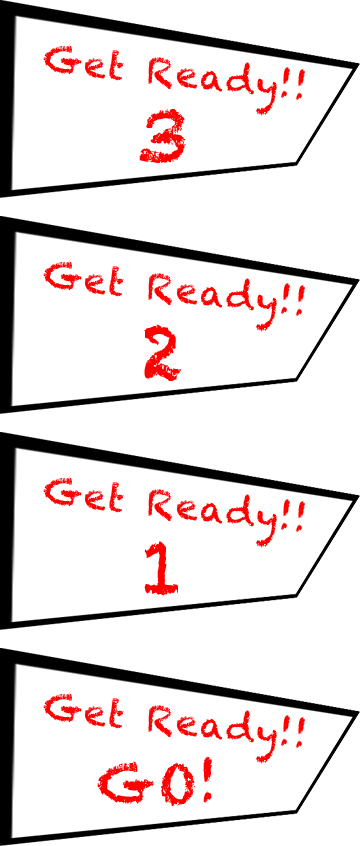
<style>
.page{position:relative;width:360px;height:846px;background:#ffffff}
.page>*{position:absolute;margin:0}
.t1{font:36px "Chalkduster";letter-spacing:0.05em;color:#ff0000}
.t2{font:75px "Chalkduster";letter-spacing:0.05em;color:#ff0000}
.t3{font:53px "Chalkduster";letter-spacing:0.05em;color:#ff0000}
</style>
<div class="page">
<p class="t1" style="left:43px;top:45px;width:262px;height:71px;rotate:7deg">Get Ready!!</p>
<p class="t2" style="left:139px;top:109px;width:47px;height:54px">3</p>
<p class="t1" style="left:43px;top:261px;width:262px;height:71px;rotate:7deg">Get Ready!!</p>
<p class="t2" style="left:144px;top:324px;width:37px;height:57px">2</p>
<p class="t1" style="left:43px;top:477px;width:262px;height:71px;rotate:7deg">Get Ready!!</p>
<p class="t2" style="left:144px;top:541px;width:34px;height:55px">1</p>
<p class="t1" style="left:43px;top:693px;width:262px;height:71px;rotate:7deg">Get Ready!!</p>
<p class="t3" style="left:97px;top:756px;width:115px;height:50px">GO!</p>
</div>
